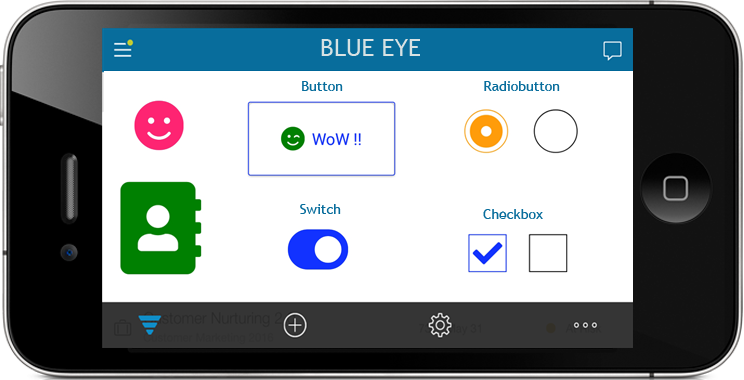
<style>
.page{position:relative;width:744px;height:380px;background:#ffffff}
.page>*{position:absolute;margin:0}
.t1{font:24px "TrebuchetMS";color:#d8e2e3}
.t2{font:14px "TrebuchetMS";color:#086d9c}
</style>
<div class="page">
<p class="t1" style="left:321px;top:39px;width:99px;height:17px">BLUE EYE</p>
<p class="t2" style="left:302px;top:81px;width:41px;height:10px">Button</p>
<p class="t2" style="left:484px;top:81px;width:76px;height:10px">Radiobutton</p>
<p class="t2" style="left:300px;top:204px;width:41px;height:10px">Switch</p>
<p class="t2" style="left:483px;top:209px;width:60px;height:10px">Checkbox</p>
</div>
